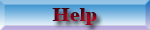
<style>
.page{position:relative;width:150px;height:30px}
.page>*{position:absolute;margin:0}
.t1{font:18px "Elephant-Regular"}
</style>
<div class="page">
<p class="t1" style="left:52px;top:8px;width:45px;height:17px">Help</p>
</div>
